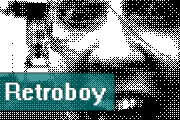
<style>
.page{position:relative;width:180px;height:120px;background:#000000}
.page>*{position:absolute;margin:0}
.t1{font:22px "System";color:#ffffff}
</style>
<div class="page">
<p class="t1" style="left:5px;top:82px;width:101px;height:24px">Retroboy</p>
</div>
